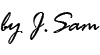
<style>
.page{position:relative;width:100px;height:55px;background:#ffffff}
.page>*{position:absolute;margin:0}
.t1{font:29.2px "RageItalic";color:#000000}
</style>
<div class="page">
<p class="t1" style="left:0px;top:12px;width:100px;height:32px">by J.Sam</p>
</div>
